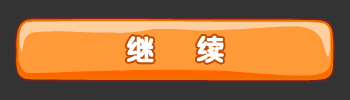
<style>
.page{position:relative;width:350px;height:100px;background:#333333}
.page>*{position:absolute;margin:0}
.t1{font:28px "JCuYuan";letter-spacing:0.3em;color:#fefefe;font-weight:bold}
</style>
<div class="page">
<p class="t1" style="left:126px;top:35px;width:98px;height:28px">继  续</p>
</div>
